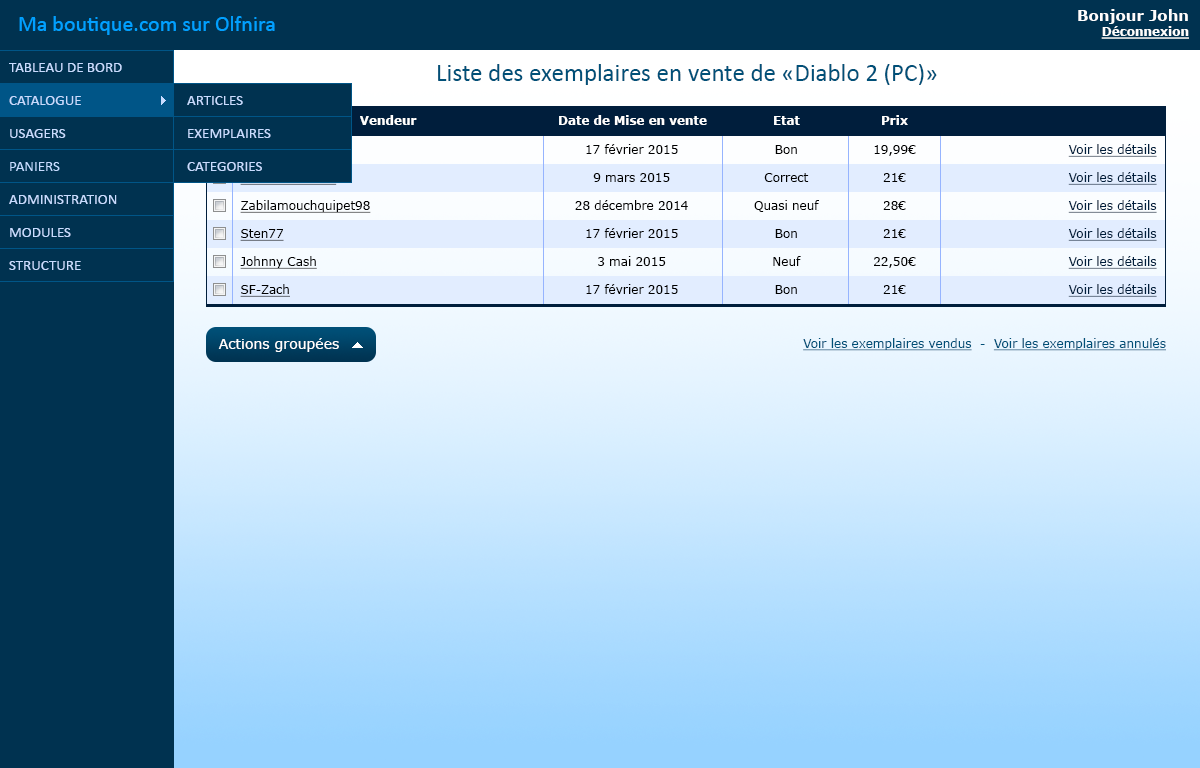
<style>
.page{position:relative;width:1200px;height:768px;background:#003250}
.page>*{position:absolute;margin:0}
.t1{font:22px "Calibri";color:#01a0ff}
.t2{font:15px "Verdana-Bold";color:#fefefe}
.t3{font:12px "Verdana-Bold";color:#fefefe;text-decoration:underline}
.t4{font:15px "Calibri";color:#c8dcff}
.t5{font:25px "Calibri";color:#005078}
.t6{font:12px "Verdana-Bold";color:#ffffff}
.t7{font:12px "Verdana";color:#000000}
.t8{font:12px "Verdana";color:#001e3c;text-decoration:underline}
.t9{font:12px "Verdana";color:#000000;text-decoration:underline}
.t10{font:14px "Verdana";color:#ffffff}
.t11{font:12px "Verdana";color:#005078;text-decoration:underline}
.t12{font:12px "Verdana";color:#005078}
</style>
<div class="page">
<p class="t1" style="left:19px;top:16px;width:256px;height:19px">Ma boutique.com sur Olfnira</p>
<p class="t2" style="left:1078px;top:9px;width:111px;height:30px;text-align:right">Bonjour John<br><span class="t3">Déconnexion</span></p>
<p class="t4" style="left:9px;top:63px;width:113px;height:9px">TABLEAU DE BORD</p>
<p class="t5" style="left:438px;top:64px;width:499px;height:21px">Liste des exemplaires en vente de «Diablo 2 (PC)»</p>
<p class="t4" style="left:9px;top:96px;width:72px;height:9px">CATALOGUE</p>
<p class="t4" style="left:187px;top:96px;width:56px;height:9px">ARTICLES</p>
<p class="t6" style="left:360px;top:115px;width:57px;height:10px">Vendeur</p>
<p class="t6" style="left:559px;top:115px;width:148px;height:10px">Date de Mise en vente</p>
<p class="t6" style="left:774px;top:116px;width:26px;height:9px">Etat</p>
<p class="t6" style="left:882px;top:115px;width:26px;height:10px">Prix</p>
<p class="t4" style="left:10px;top:129px;width:56px;height:9px">USAGERS</p>
<p class="t4" style="left:188px;top:129px;width:83px;height:9px">EXEMPLAIRES</p>
<p class="t7" style="left:586px;top:144px;width:92px;height:10px">17 février 2015</p>
<p class="t7" style="left:775px;top:145px;width:22px;height:9px">Bon</p>
<p class="t7" style="left:874px;top:145px;width:42px;height:11px">19,99€</p>
<p class="t8" style="left:1068px;top:144px;width:89px;height:13px">Voir les détails</p>
<p class="t4" style="left:187px;top:162px;width:75px;height:9px">CATEGORIES</p>
<p class="t7" style="left:593px;top:173px;width:77px;height:9px">9 mars 2015</p>
<p class="t7" style="left:764px;top:173px;width:45px;height:9px">Correct</p>
<p class="t7" style="left:883px;top:173px;width:23px;height:9px">21€</p>
<p class="t8" style="left:1068px;top:172px;width:89px;height:13px">Voir les détails</p>
<p class="t4" style="left:9px;top:195px;width:108px;height:9px">ADMINISTRATION</p>
<p class="t9" style="left:240px;top:200px;width:131px;height:13px">Zabilamouchquipet98</p>
<p class="t7" style="left:575px;top:200px;width:113px;height:10px">28 décembre 2014</p>
<p class="t7" style="left:754px;top:200px;width:65px;height:12px">Quasi neuf</p>
<p class="t7" style="left:883px;top:201px;width:23px;height:9px">28€</p>
<p class="t8" style="left:1068px;top:200px;width:89px;height:13px">Voir les détails</p>
<p class="t4" style="left:10px;top:228px;width:61px;height:9px">MODULES</p>
<p class="t9" style="left:240px;top:229px;width:44px;height:12px">Sten77</p>
<p class="t7" style="left:586px;top:228px;width:92px;height:10px">17 février 2015</p>
<p class="t7" style="left:775px;top:229px;width:22px;height:9px">Bon</p>
<p class="t7" style="left:883px;top:229px;width:23px;height:9px">21€</p>
<p class="t8" style="left:1068px;top:228px;width:89px;height:13px">Voir les détails</p>
<p class="t9" style="left:240px;top:256px;width:77px;height:13px">Johnny Cash</p>
<p class="t7" style="left:598px;top:256px;width:68px;height:10px">3 mai 2015</p>
<p class="t7" style="left:773px;top:256px;width:28px;height:10px">Neuf</p>
<p class="t7" style="left:874px;top:257px;width:42px;height:11px">22,50€</p>
<p class="t8" style="left:1068px;top:256px;width:89px;height:13px">Voir les détails</p>
<p class="t4" style="left:9px;top:261px;width:72px;height:9px">STRUCTURE</p>
<p class="t9" style="left:240px;top:284px;width:50px;height:13px">SF-Zach</p>
<p class="t7" style="left:586px;top:284px;width:92px;height:10px">17 février 2015</p>
<p class="t7" style="left:775px;top:285px;width:22px;height:9px">Bon</p>
<p class="t7" style="left:883px;top:285px;width:23px;height:9px">21€</p>
<p class="t8" style="left:1068px;top:284px;width:89px;height:13px">Voir les détails</p>
<p class="t10" style="left:218px;top:338px;width:121px;height:14px">Actions groupées</p>
<p class="t11" style="left:803px;top:338px;width:363px;height:13px">Voir les exemplaires vendus<span class="t12">  -  </span>Voir les exemplaires annulés</p>
</div>
